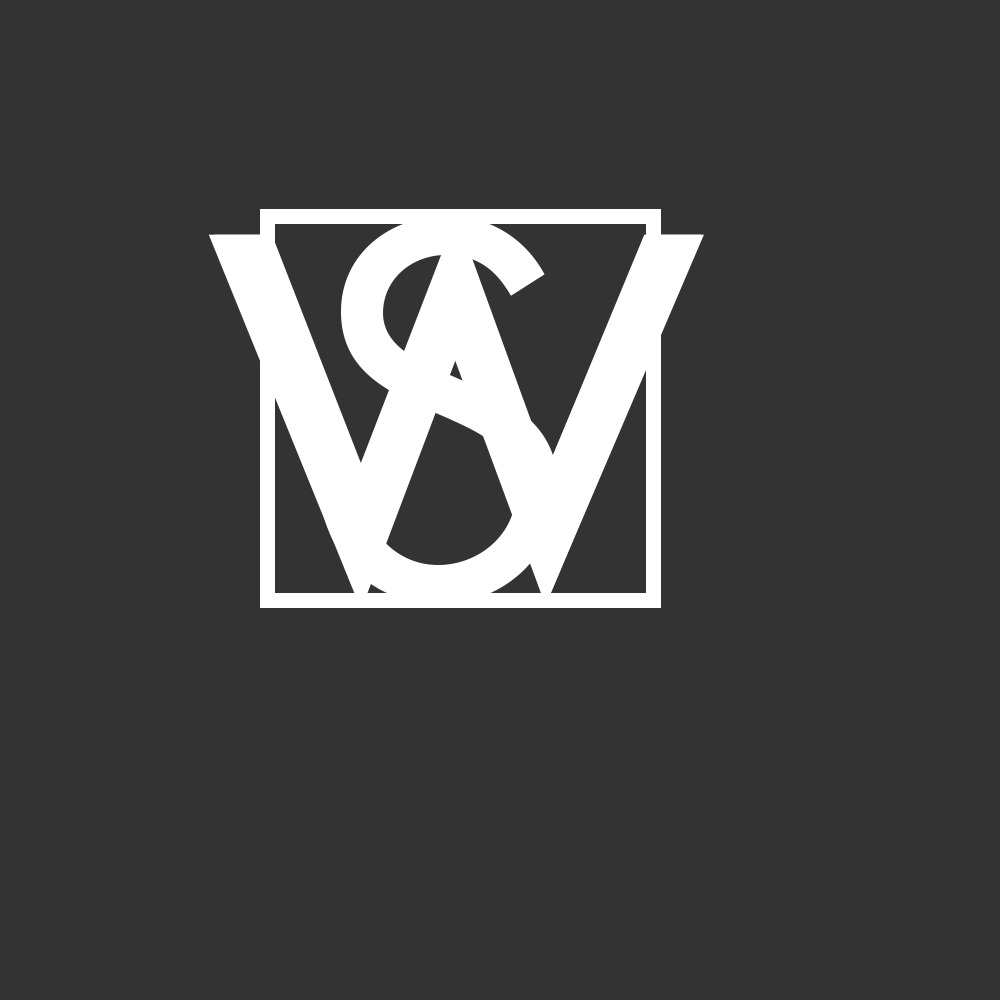
<style>
.page{position:relative;width:1000px;height:1000px;background:#333333}
.page>*{position:absolute;margin:0}
.t1{font:461.6px "Futura-Medium";color:#ffffff}
.t2{font:499.3px "FuturaStd-Book";color:#ffffff}
</style>
<div class="page">
<p class="t1" style="left:208px;top:217px;width:496px;height:389px">W</p>
<p class="t1" style="left:214px;top:217px;width:488px;height:389px">W</p>
<p class="t2" style="left:321px;top:215px;width:237px;height:389px">S</p>
</div>
